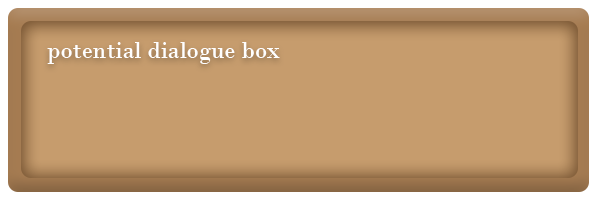
<style>
.page{position:relative;width:600px;height:200px;background:#c69c6d}
.page>*{position:absolute;margin:0}
.t1{font:25px "BodoniMT";color:#ffffff}
.t2{font:41.7px "BodoniMT";color:#ffffff}
</style>
<div class="page">
<p class="t1" style="left:47px;top:42px;width:233px;height:22px"><span class="t2"><br></span>potential dialogue box</p>
</div>
